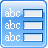
<style>
.page{position:relative;width:48px;height:48px}
.page>*{position:absolute;margin:0}
.t1{font:12px "IskoolaPota";color:#fefefe}
.t2{font:12px "IskoolaPota";color:#ffffff}
</style>
<div class="page">
<p class="t1" style="left:5px;top:8px;width:15px;height:9px">abc</p>
<p class="t2" style="left:5px;top:20px;width:15px;height:9px">abc</p>
<p class="t2" style="left:5px;top:32px;width:15px;height:9px">abc</p>
</div>
